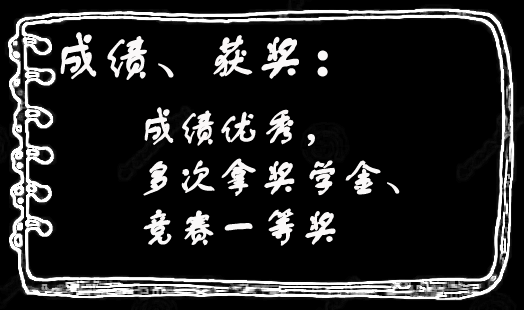
<style>
.page{position:relative;width:524px;height:310px;background:#000000}
.page>*{position:absolute;margin:0}
.t1{font:50px "FZSTK--GBK1-0";color:#faf8f8;font-weight:bold}
.t2{font:60px "FZSTK--GBK1-0";color:#faf8f8;font-weight:bold}
.t3{font:40px/50px "FZSTK--GBK1-0";color:#faf8f8;font-weight:bold}
</style>
<div class="page">
<p class="t1" style="left:60px;top:32px;width:268px;height:48px">成绩、获奖<span class="t2">：</span></p>
<p class="t3" style="left:143px;top:107px;width:257px;height:139px">成绩优秀，<br>多次拿奖学金、<br>竞赛一等奖</p>
</div>
